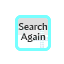
<style>
.page{position:relative;width:64px;height:64px;background:#ffffff}
.page>*{position:absolute;margin:0}
.t1{font:10px/9.6px "AmiraParadiso";color:#333333}
</style>
<div class="page">
<p class="t1" style="left:18px;top:23px;width:30px;height:19px;text-align:center">Search<br>Again</p>
</div>
